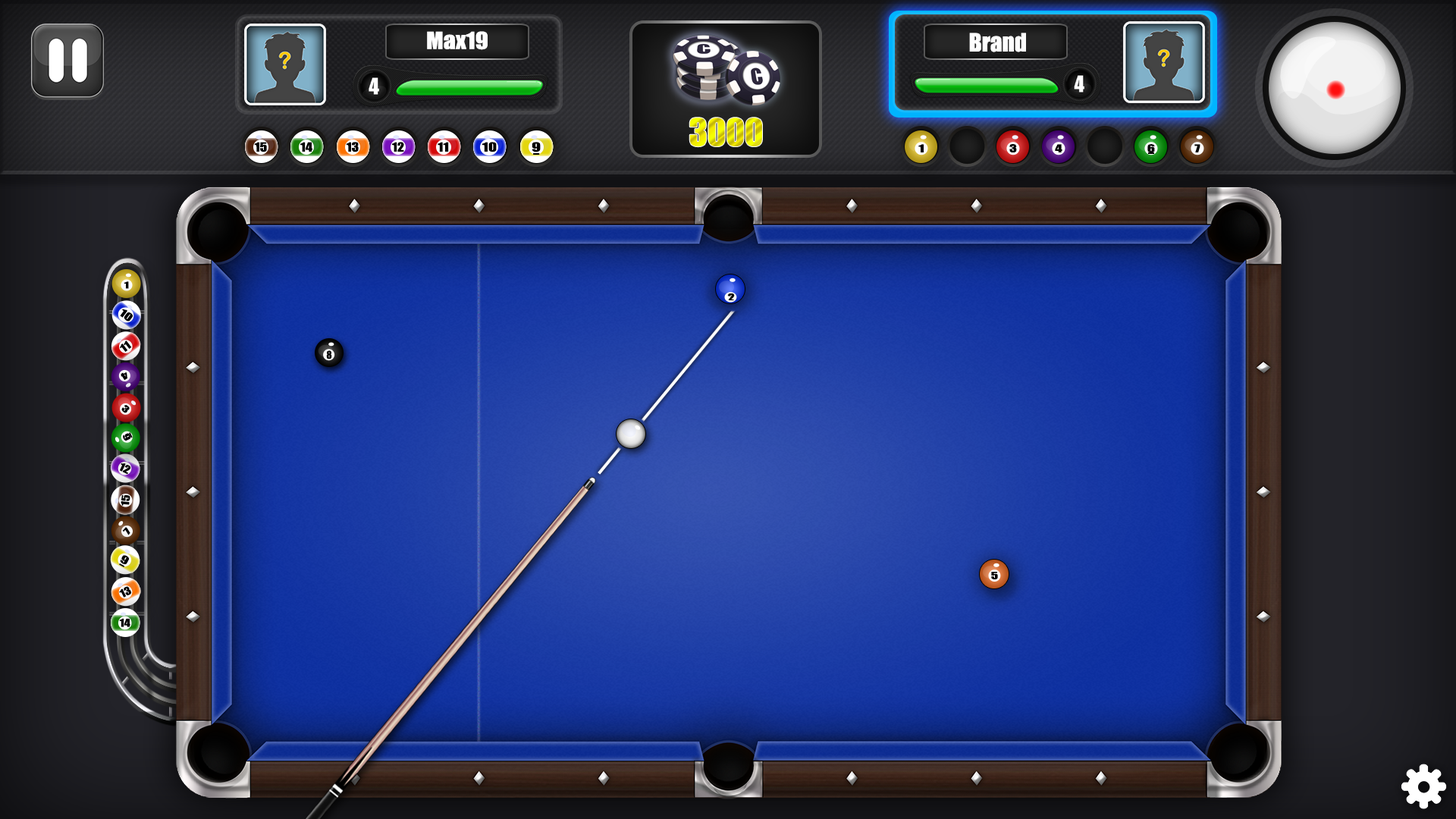
<style>
.page{position:relative;width:1456px;height:819px}
.page>*{position:absolute;margin:0}
.t1{font:21.7px "Impact";color:#ffffff;scale:1.11 1}
.t2{font:23.4px "Impact";color:#ffffff}
.t3{font:34.8px "Impact"}
.t4{font:11.8px "Impact";color:#000000;scale:1.17 1}
.t5{font:11.8px "Impact";color:#000000;scale:1.24 1}
.t6{font:11.8px "Impact";color:#000000;scale:1.37 1}
.t7{font:11.8px "Impact";color:#000000;scale:1.43 1}
.t8{font:10px "Impact";color:#000000;scale:1.44 1}
.t9{font:8.8px "Impact";color:#000000;scale:1.44 1}
.t10{font:10.4px "Impact";color:#000000;scale:1.36 1}
.t11{font:10.4px "Impact";color:#000000;scale:1.23 1}
.t12{font:10px "Impact";color:#000000}
.t13{font:10.4px "Impact";color:#000000;scale:1.17 1}
.t14{font:10.4px "Impact";color:#000000;scale:1.43 1}
.t15{font:9.3px "Impact";color:#000000;scale:1.44 1}
</style>
<div class="page">
<p class="t1" style="left:427px;top:31px;width:61px;height:19px">Max19</p>
<p class="t2" style="left:969px;top:33px;width:57px;height:19px">Brand</p>
<p class="t3" style="left:689px;top:118px;width:73px;height:29px">3000</p>
<p class="t4" style="left:254px;top:142px;width:13px;height:10px">15</p>
<p class="t4" style="left:300px;top:142px;width:12px;height:10px">14</p>
<p class="t4" style="left:346px;top:142px;width:13px;height:10px">13</p>
<p class="t4" style="left:392px;top:142px;width:12px;height:10px">12</p>
<p class="t5" style="left:438px;top:142px;width:11px;height:10px">11</p>
<p class="t6" style="left:482px;top:142px;width:15px;height:10px">10</p>
<p class="t7" style="left:532px;top:142px;width:9px;height:10px">9</p>
<p class="t8" style="left:918px;top:144px;width:6px;height:8px">1</p>
<p class="t8" style="left:1009px;top:144px;width:8px;height:8px">3</p>
<p class="t8" style="left:1055px;top:144px;width:7px;height:8px">4</p>
<p class="t8" style="left:1147px;top:144px;width:8px;height:8px">6</p>
<p class="t8" style="left:1194px;top:144px;width:6px;height:8px">7</p>
<p class="t9" style="left:124px;top:281px;width:5px;height:8px">1</p>
<p class="t10" style="left:120px;top:309px;width:13px;height:13px;rotate:37deg">10</p>
<p class="t11" style="left:120px;top:340px;width:12px;height:12px;rotate:-38deg">11</p>
<p class="t12" style="left:326px;top:350px;width:6px;height:9px">8</p>
<p class="t9" style="left:121px;top:372px;width:6px;height:9px;rotate:148deg">4</p>
<p class="t9" style="left:121px;top:404px;width:9px;height:9px;rotate:42deg">3</p>
<p class="t9" style="left:123px;top:433px;width:8px;height:8px;rotate:-115deg">6</p>
<p class="t13" style="left:119px;top:463px;width:11px;height:12px;rotate:26deg">12</p>
<p class="t13" style="left:121px;top:494px;width:9px;height:12px;rotate:-83deg">15</p>
<p class="t9" style="left:122px;top:527px;width:8px;height:8px;rotate:-49deg">7</p>
<p class="t14" style="left:120px;top:555px;width:9px;height:9px;rotate:29deg">9</p>
<p class="t15" style="left:991px;top:572px;width:7px;height:7px">5</p>
<p class="t13" style="left:119px;top:586px;width:13px;height:12px;rotate:-26deg">13</p>
<p class="t13" style="left:119px;top:618px;width:11px;height:9px">14</p>
</div>
